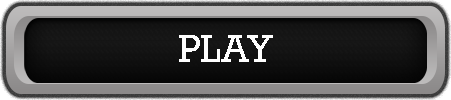
<style>
.page{position:relative;width:451px;height:100px}
.page>*{position:absolute;margin:0}
.t1{font:39.8px "Rockwell";color:#ffffff}
</style>
<div class="page">
<p class="t1" style="left:179px;top:35px;width:94px;height:27px">PLAY</p>
</div>
